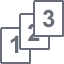
<style>
.page{position:relative;width:64px;height:64px;background:#ffffff}
.page>*{position:absolute;margin:0}
.t1{font:24px "Arial-BoldMT";color:#676e78}
</style>
<div class="page">
<p class="t1" style="left:43px;top:9px;width:12px;height:19px">3</p>
<p class="t1" style="left:28px;top:23px;width:12px;height:18px">2</p>
<p class="t1" style="left:10px;top:35px;width:9px;height:18px">1</p>
</div>
